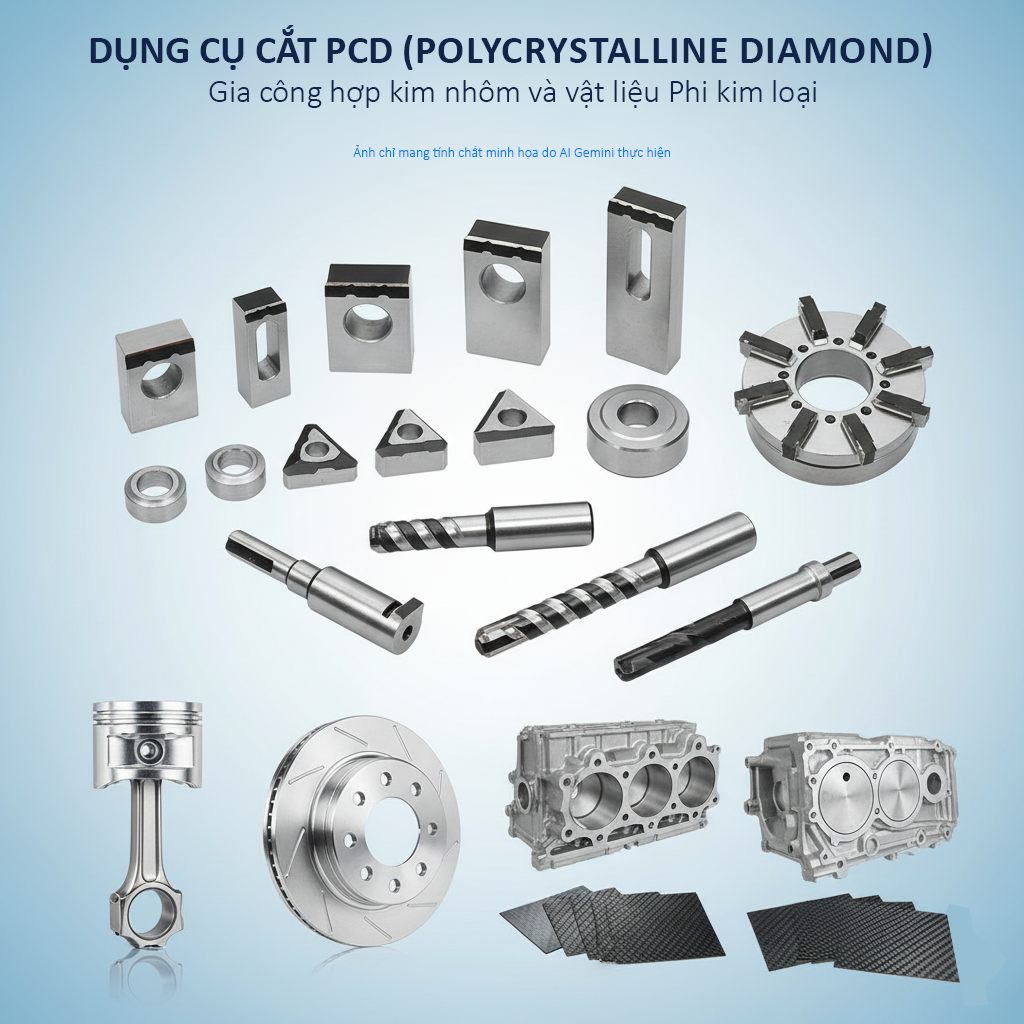
<style>
.page{position:relative;width:1024px;height:1024px}
.page>*{position:absolute;margin:0}
.t1{font:39.7px "Calibri-Bold";color:#11254a;text-transform:uppercase}
.t2{font:39.7px "Calibri-Bold";color:#11254a}
.t3{font:32.8px "Calibri-Light";color:#11254a}
.t4{font:14px "Calibri-Light";color:#0078ff}
</style>
<div class="page">
<p class="t1" style="left:90px;top:25px;width:842px;height:45px"><span class="t2">DỤNG CỤ CẮT PCD (</span>Polycrystalline Diamond)</p>
<p class="t3" style="left:209px;top:79px;width:607px;height:29px">Gia công hợp kim nhôm và vật liệu Phi kim loại</p>
<p class="t4" style="left:353px;top:145px;width:317px;height:15px">Ảnh chỉ mang tính chất minh họa do AI Gemini thực hiện</p>
</div>
